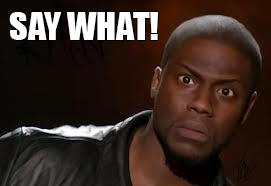
<style>
.page{position:relative;width:271px;height:186px}
.page>*{position:absolute;margin:0}
.t1{font:36px "Impact";color:#ffffff}
</style>
<div class="page">
<p class="t1" style="left:9px;top:12px;width:150px;height:28px">SAY WHAT!</p>
</div>
